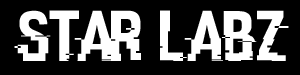
<style>
.page{position:relative;width:300px;height:75px;background:#000000}
.page>*{position:absolute;margin:0}
.t1{font:72px "HACKED";color:#ffffff}
</style>
<div class="page">
<p class="t1" style="left:14px;top:10px;width:275px;height:51px">star labz</p>
</div>
